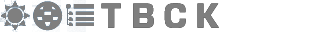
<style>
.page{position:relative;width:320px;height:32px;background:#ffffff}
.page>*{position:absolute;margin:0}
.t1{font:35.5px "EurostileNextLTPro-Bold";color:#7f7f7f}
</style>
<div class="page">
<p class="t1" style="left:101px;top:3px;width:20px;height:25px">T</p>
<p class="t1" style="left:133px;top:3px;width:21px;height:25px">B</p>
<p class="t1" style="left:164px;top:3px;width:22px;height:25px">C</p>
<p class="t1" style="left:197px;top:3px;width:22px;height:25px">K</p>
</div>
